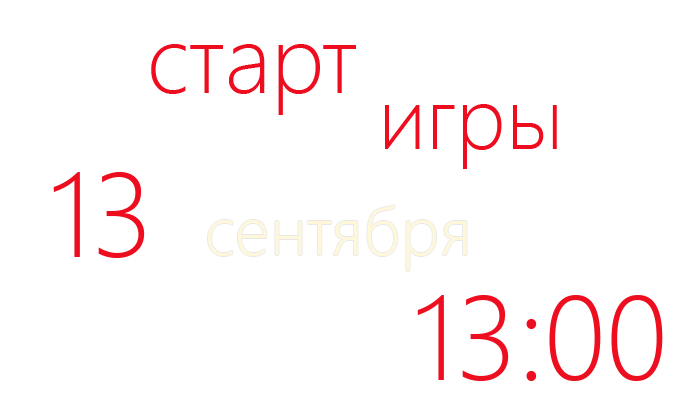
<style>
.page{position:relative;width:700px;height:420px;background:#ffffff}
.page>*{position:absolute;margin:0}
.t1{font:95px "SegoeUI-Light";color:#ed0d1f}
.t2{font:88px "SegoeUI-Light";color:#ed0d1f}
.t3{font:120px "SegoeUI-Light";color:#ed0d1f}
.t4{font:68px "SegoeUI-Light";color:#fef7d9}
.t5{font:120px "SegoeUI-Light";color:#ed0e20}
</style>
<div class="page">
<p class="t1" style="left:151px;top:44px;width:205px;height:71px">старт</p>
<p class="t2" style="left:385px;top:104px;width:172px;height:65px">игры</p>
<p class="t3" style="left:53px;top:172px;width:92px;height:86px">13</p>
<p class="t4" style="left:208px;top:205px;width:259px;height:66px">сентября</p>
<p class="t5" style="left:417px;top:295px;width:246px;height:86px">13:00</p>
</div>
